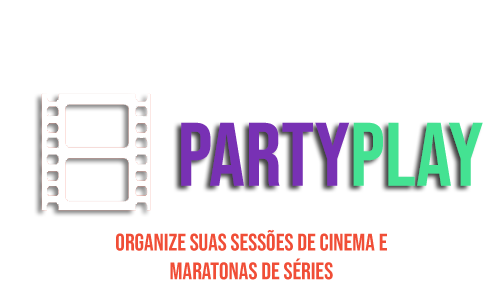
<style>
.page{position:relative;width:500px;height:300px;background:#ffffff}
.page>*{position:absolute;margin:0}
.t1{font:90px "BebasNeue-Regular";color:#7831b4;text-transform:uppercase}
.t2{font:90px "BebasNeue-Regular";color:#44e292;text-transform:uppercase}
.t3{font:24px "BebasNeue-Regular";color:#f04e37;text-transform:uppercase}
</style>
<div class="page">
<p class="t1" style="left:181px;top:122px;width:302px;height:64px">PARTY<span class="t2">PLAY</span></p>
<p class="t3" style="left:116px;top:229px;width:271px;height:51px;text-align:center">ORGANIZE SUAS SESSÕES DE CINEMA E MARATONAS DE SÉRIES</p>
</div>
